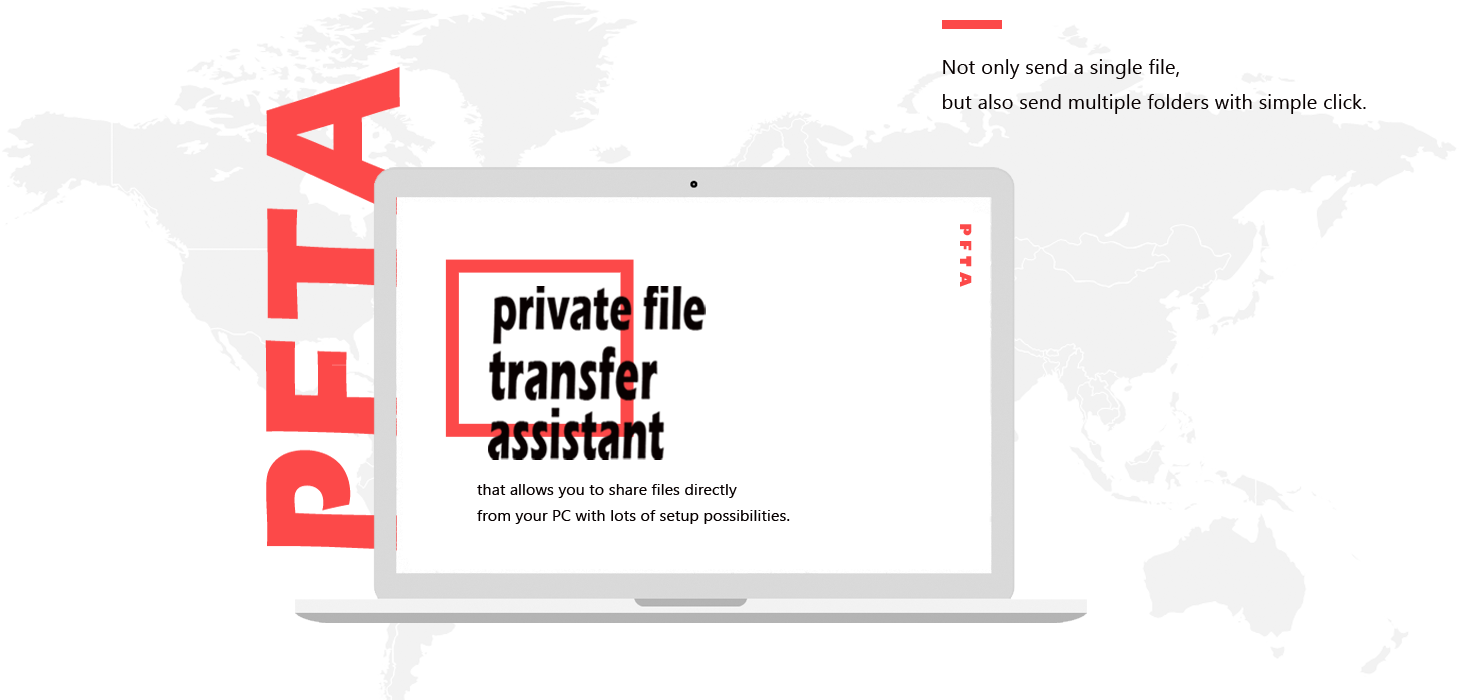
<style>
.page{position:relative;width:1460px;height:700px;background:#ffffff}
.page>*{position:absolute;margin:0}
.t1{font:20px "Gadugi";letter-spacing:0.01em;color:#080101}
.t2{font:15px "GillSans-UltraBold";letter-spacing:0.01em;color:#fc4949}
.t3{font:15.1px "Gadugi";letter-spacing:0.01em;color:#080101;scale:1.05 1}
</style>
<div class="page">
<p class="t1" style="left:943px;top:59px;width:423px;height:55px">Not only send a single file, <br>but also send multiple folders with simple click.</p>
<p class="t2" style="left:960px;top:224px;width:12px;height:63px">P F T A</p>
<p class="t3" style="left:477px;top:484px;width:313px;height:40px">that allows you to share files directly <br>from your PC with lots of setup possibilities.</p>
</div>
